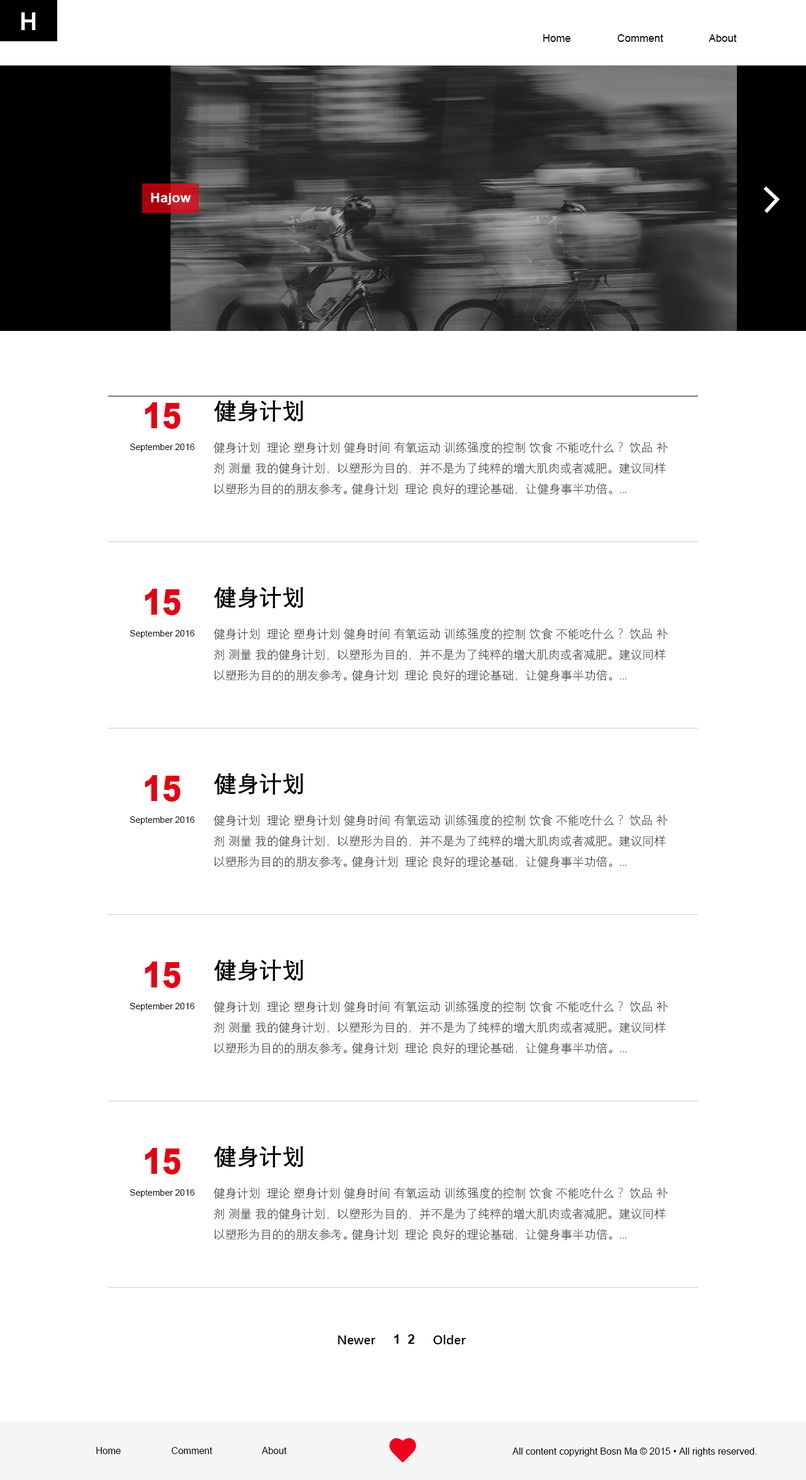
<style>
.page{position:relative;width:806px;height:1480px;background:#ffffff}
.page>*{position:absolute;margin:0}
.t1{font:24.8px "Arial-BoldMT";color:#ffffff}
.t2{font:10.6px "ArialMT";color:#000000}
.t3{font:13px "Arial-BoldMT";color:#fefefe;scale:1.06 1}
.t4{font:23px "DengXian-Bold";color:#000000}
.t5{font:35.4px "Arial-Black";color:#e60012;scale:0.82 1}
.t6{font:8.8px "ArialMT";color:#000000}
.t7{font:11.8px "DengXian-Light";color:#000000}
.t8{font:13px "DengXian-Bold";color:#000000}
.t9{font:13px "Arial-BoldMT";color:#000000}
.t10{font:9.4px "ArialMT";color:#000000}
</style>
<div class="page">
<p class="t1" style="left:21px;top:12px;width:14px;height:18px">H</p>
<p class="t2" style="left:543px;top:34px;width:27px;height:8px">Home</p>
<p class="t2" style="left:617px;top:34px;width:46px;height:8px">Comment</p>
<p class="t2" style="left:708px;top:34px;width:29px;height:8px">About</p>
<p class="t3" style="left:151px;top:193px;width:40px;height:12px">Hajow</p>
<p class="t4" style="left:214px;top:400px;width:89px;height:22px">健身计划</p>
<p class="t5" style="left:145px;top:402px;width:35px;height:27px">15</p>
<p class="t6" style="left:130px;top:444px;width:65px;height:8px">September 2016</p>
<p class="t7" style="left:213px;top:442px;width:455px;height:53px">健身计划  理论 塑身计划 健身时间 有氧运动 训练强度的控制 饮食 不能吃什么？ 饮品 补剂 测量 我的健身计划，以塑形为目的，并不是为了纯粹的增大肌肉或者减肥。建议同样以塑形为目的的朋友参考。 健身计划  理论 良好的理论基础，让健身事半功倍。...</p>
<p class="t5" style="left:145px;top:589px;width:35px;height:26px">15</p>
<p class="t4" style="left:214px;top:586px;width:89px;height:22px">健身计划</p>
<p class="t6" style="left:130px;top:630px;width:65px;height:8px">September 2016</p>
<p class="t7" style="left:213px;top:628px;width:455px;height:53px">健身计划  理论 塑身计划 健身时间 有氧运动 训练强度的控制 饮食 不能吃什么？ 饮品 补剂 测量 我的健身计划，以塑形为目的，并不是为了纯粹的增大肌肉或者减肥。建议同样以塑形为目的的朋友参考。 健身计划  理论 良好的理论基础，让健身事半功倍。...</p>
<p class="t4" style="left:214px;top:773px;width:89px;height:22px">健身计划</p>
<p class="t5" style="left:145px;top:775px;width:35px;height:27px">15</p>
<p class="t6" style="left:130px;top:816px;width:65px;height:9px">September 2016</p>
<p class="t7" style="left:213px;top:815px;width:455px;height:53px">健身计划  理论 塑身计划 健身时间 有氧运动 训练强度的控制 饮食 不能吃什么？ 饮品 补剂 测量 我的健身计划，以塑形为目的，并不是为了纯粹的增大肌肉或者减肥。建议同样以塑形为目的的朋友参考。 健身计划  理论 良好的理论基础，让健身事半功倍。...</p>
<p class="t5" style="left:145px;top:961px;width:35px;height:27px">15</p>
<p class="t4" style="left:214px;top:959px;width:89px;height:22px">健身计划</p>
<p class="t7" style="left:213px;top:1001px;width:455px;height:53px">健身计划  理论 塑身计划 健身时间 有氧运动 训练强度的控制 饮食 不能吃什么？ 饮品 补剂 测量 我的健身计划，以塑形为目的，并不是为了纯粹的增大肌肉或者减肥。建议同样以塑形为目的的朋友参考。 健身计划  理论 良好的理论基础，让健身事半功倍。...</p>
<p class="t6" style="left:130px;top:1003px;width:65px;height:8px">September 2016</p>
<p class="t4" style="left:214px;top:1145px;width:89px;height:22px">健身计划</p>
<p class="t5" style="left:145px;top:1148px;width:35px;height:26px">15</p>
<p class="t6" style="left:130px;top:1189px;width:65px;height:8px">September 2016</p>
<p class="t7" style="left:213px;top:1187px;width:455px;height:53px">健身计划  理论 塑身计划 健身时间 有氧运动 训练强度的控制 饮食 不能吃什么？ 饮品 补剂 测量 我的健身计划，以塑形为目的，并不是为了纯粹的增大肌肉或者减肥。建议同样以塑形为目的的朋友参考。 健身计划  理论 良好的理论基础，让健身事半功倍。...</p>
<p class="t8" style="left:338px;top:1334px;width:128px;height:10px">Newer     <span class="t9">1  2     </span>Older</p>
<p class="t10" style="left:96px;top:1447px;width:25px;height:7px">Home</p>
<p class="t10" style="left:172px;top:1447px;width:40px;height:7px">Comment</p>
<p class="t10" style="left:261px;top:1447px;width:26px;height:7px">About</p>
<p class="t10" style="left:512px;top:1447px;width:245px;height:9px">All content copyright Bosn Ma © 2015 • All rights reserved.</p>
</div>
